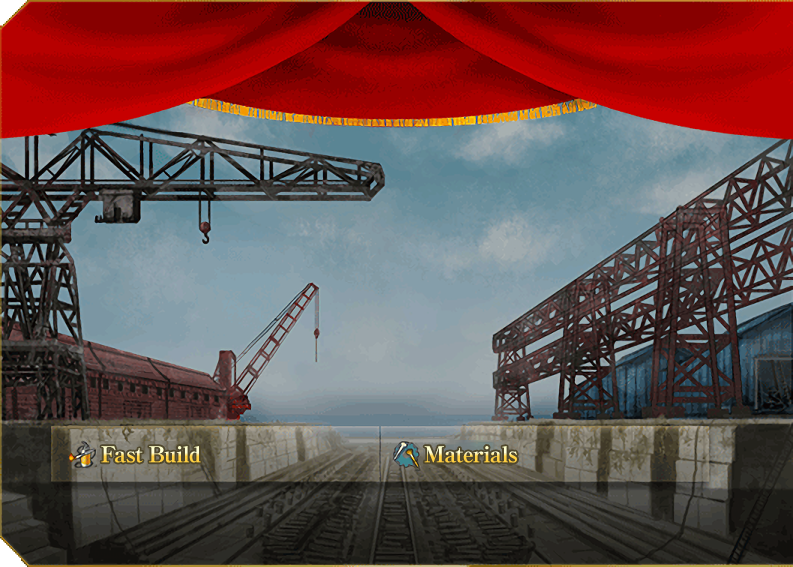
<style>
.page{position:relative;width:793px;height:567px}
.page>*{position:absolute;margin:0}
.t1{font:22px "RyuminPro-ExBold";letter-spacing:-0.04em}
</style>
<div class="page">
<p class="t1" style="left:101px;top:446px;width:100px;height:17px">Fast Build</p>
<p class="t1" style="left:424px;top:446px;width:93px;height:17px">Materials</p>
</div>
